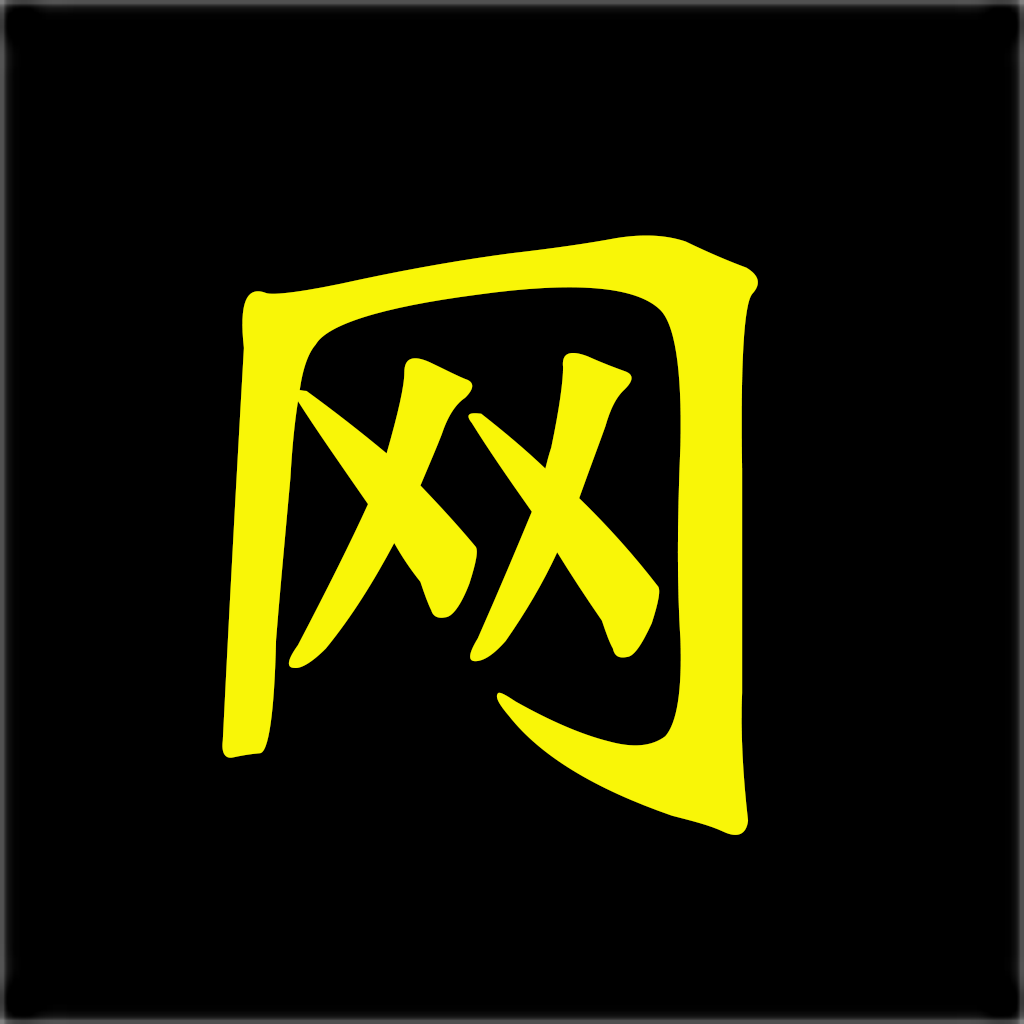
<style>
.page{position:relative;width:1024px;height:1024px;background:#000000}
.page>*{position:absolute;margin:0}
.t1{font:844.4px "Weibei-SC-Bold";color:#f9f607}
</style>
<div class="page">
<p class="t1" style="left:222px;top:235px;width:536px;height:600px">网</p>
</div>
